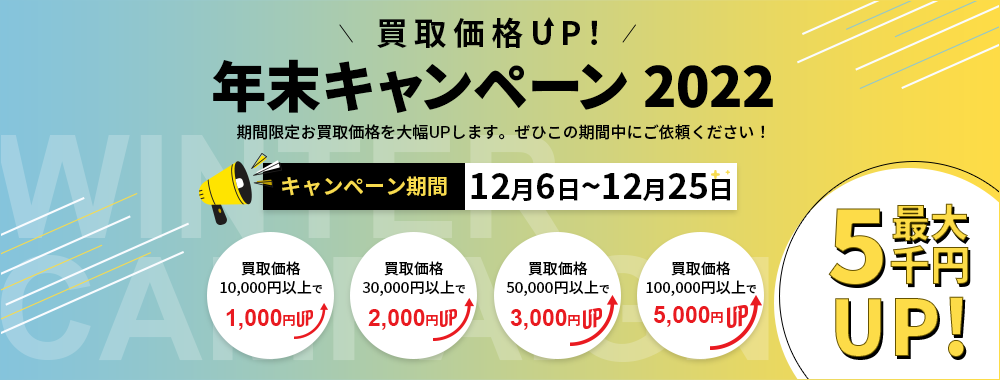
<style>
.page{position:relative;width:1000px;height:380px;background:#ffffff}
.page>*{position:absolute;margin:0}
.t1{font:32px "NotoSansCJKjp-Bold";letter-spacing:0.2em;color:#000000}
.t2{font:55px "NotoSansCJKjp-Black";color:#000000}
.t3{font:16px "NotoSansCJKjp-Medium";color:#000000}
.t4{font:34.9px "NotoSansCJKjp-Bold";color:#000000}
.t5{font:24.9px "NotoSansCJKjp-Bold";color:#000000}
.t6{font:21px "NotoSansCJKjp-Bold";color:#f8db4e}
.t7{font:41px "NotoSansCJKjp-Black";color:#fddc48}
.t8{font:104px "NotoSansCJKjp-Black";color:#fddc48}
.t9{font:39px "NotoSansCJKjp-Black";color:#fddc48}
.t10{font:15px/25px "NotoSansCJKjp-Medium";color:#000000}
.t11{font:15px/19px "NotoSansCJKjp-Medium";color:#000000}
.t12{font:11px/25px "NotoSansCJKjp-Medium";color:#000000}
.t13{font:77.2px "NotoSansCJKjp-Black";color:#fddc48}
.t14{font:23px "Arial-BoldMT";color:#e91a20}
.t15{font:13px "NotoSansCJKjp-Bold";color:#e91a20}
</style>
<div class="page">
<p class="t1" style="left:377px;top:17px;width:220px;height:31px">買取価格UP！</p>
<p class="t2" style="left:213px;top:59px;width:560px;height:54px">年末キャンペーン 2022</p>
<p class="t3" style="left:237px;top:124px;width:527px;height:16px">期間限定お買取価格を大幅UPします。ぜひこの期間中にご依頼ください！</p>
<p class="t4" style="left:471px;top:173px;width:259px;height:28px">12<span class="t5">月</span>6<span class="t5">日</span>~12<span class="t5">月</span>25<span class="t5">日</span></p>
<p class="t6" style="left:282px;top:176px;width:165px;height:20px">キャンペーン期間</p>
<p class="t7" style="left:828px;top:208px;width:141px;height:77px"><span class="t8">5</span>千円</p>
<p class="t9" style="left:892px;top:203px;width:76px;height:38px">最大</p>
<p class="t10" style="left:220px;top:261px;width:102px;height:35px;text-align:center"><span class="t11">買取価格<br></span>10,000円以上<span class="t12">で</span></p>
<p class="t10" style="left:362px;top:261px;width:103px;height:35px;text-align:center"><span class="t11">買取価格<br></span>30,000円以上<span class="t12">で</span></p>
<p class="t10" style="left:506px;top:261px;width:103px;height:35px;text-align:center"><span class="t11">買取価格<br></span>50,000円以上<span class="t12">で</span></p>
<p class="t10" style="left:646px;top:261px;width:110px;height:35px;text-align:center"><span class="t11">買取価格<br></span>100,000円以上<span class="t12">で</span></p>
<p class="t13" style="left:835px;top:296px;width:130px;height:61px">UP!</p>
<p class="t14" style="left:226px;top:309px;width:69px;height:21px">1,000<span class="t15">円</span></p>
<p class="t14" style="left:368px;top:309px;width:70px;height:21px">2,000<span class="t15">円</span></p>
<p class="t14" style="left:510px;top:309px;width:70px;height:21px">3,000<span class="t15">円</span></p>
<p class="t14" style="left:654px;top:306px;width:69px;height:21px">5,000<span class="t15">円</span></p>
</div>
